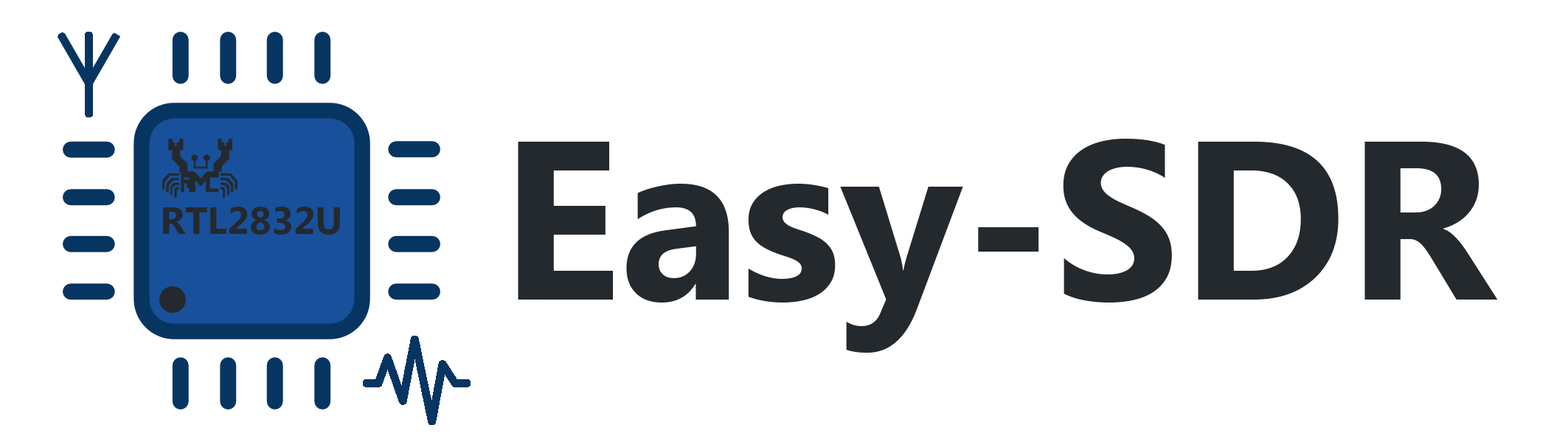
<style>
.page{position:relative;width:1568px;height:439px;background:#ffffff}
.page>*{position:absolute;margin:0}
.t1{font:225.7px "MyanmarText-Bold";color:#24292e}
.t2{font:38.4px "MyanmarText-Bold";color:#24292e}
</style>
<div class="page">
<p class="t1" style="left:518px;top:139px;width:980px;height:214px">Easy-SDR</p>
<p class="t2" style="left:163px;top:207px;width:177px;height:28px">RTL2832U</p>
</div>
